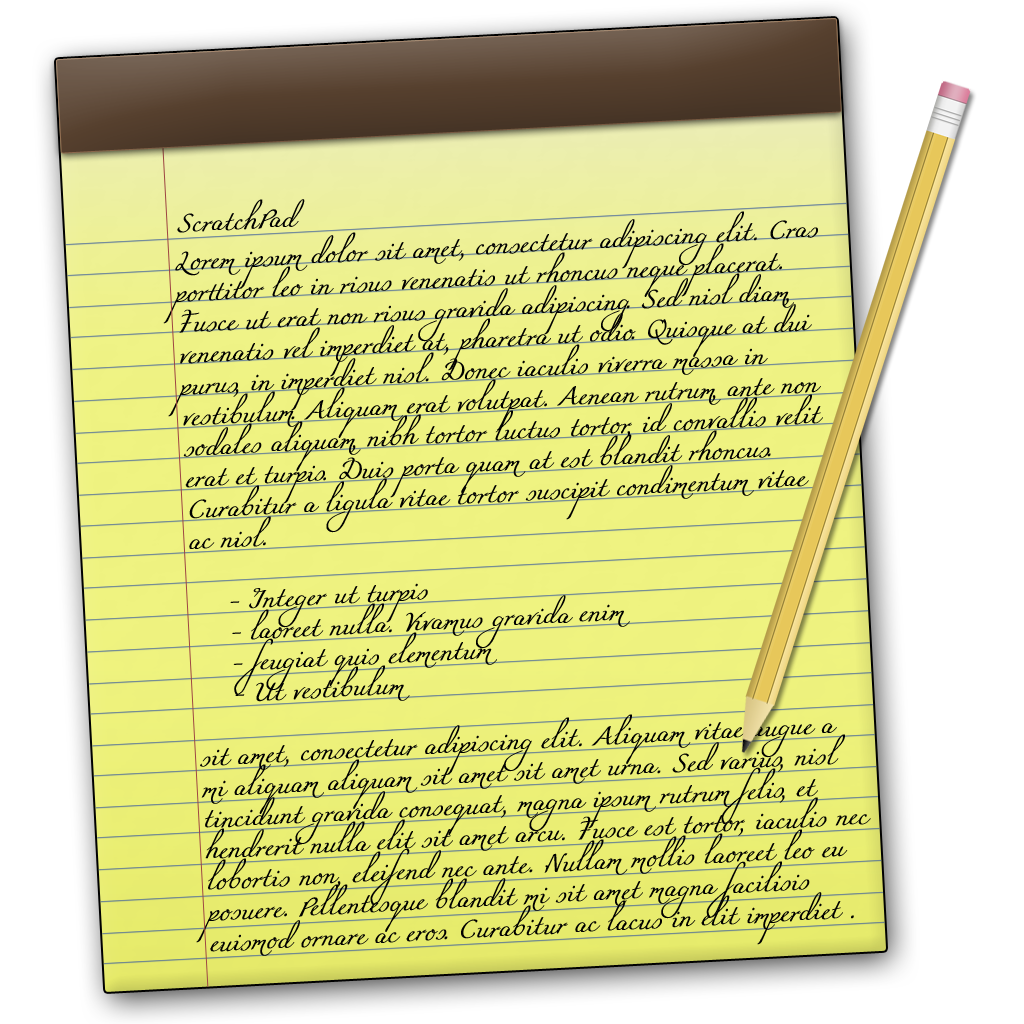
<style>
.page{position:relative;width:1024px;height:1024px}
.page>*{position:absolute;margin:0}
.t1{font:20px "Miama";color:#000000;font-weight:bold}
.t2{font:20px/31px "Miama";color:#000000;font-weight:bold}
</style>
<div class="page">
<p class="t1" style="left:177px;top:199px;width:128px;height:34px;rotate:-3deg">ScratchPad</p>
<p class="t2" style="left:163px;top:211px;width:708px;height:745px;rotate:-3deg">Lorem ipsum dolor sit amet, consectetur adipiscing elit. Cras <br>porttitor leo in risus venenatis ut rhoncus neque placerat. <br>Fusce ut erat non risus gravida adipiscing. Sed nisl diam, <br>venenatis vel imperdiet at, pharetra ut odio. Quisque at dui <br>purus, in imperdiet nisl. Donec iaculis viverra massa in <br>vestibulum. Aliquam erat volutpat. Aenean rutrum, ante non <br>sodales aliquam, nibh tortor luctus tortor, id convallis velit <br>erat et turpis. Duis porta quam at est blandit rhoncus. <br>Curabitur a ligula vitae tortor suscipit condimentum vitae <br>ac nisl.<br><br> - Integer ut turpis <br> - laoreet nulla. Vivamus gravida enim <br> - feugiat quis elementum <br> - Ut vestibulum <br> <br>sit amet, consectetur adipiscing elit. Aliquam vitae augue a <br>mi aliquam aliquam sit amet sit amet urna. Sed varius, nisl <br>tincidunt gravida consequat, magna ipsum rutrum felis, et <br>hendrerit nulla elit sit amet arcu. Fusce est tortor, iaculis nec <br>lobortis non, eleifend nec ante. Nullam mollis laoreet leo eu <br>posuere. Pellentesque blandit mi sit amet magna facilisis <br>euismod ornare ac eros. Curabitur ac lacus in elit imperdiet .</p>
</div>
